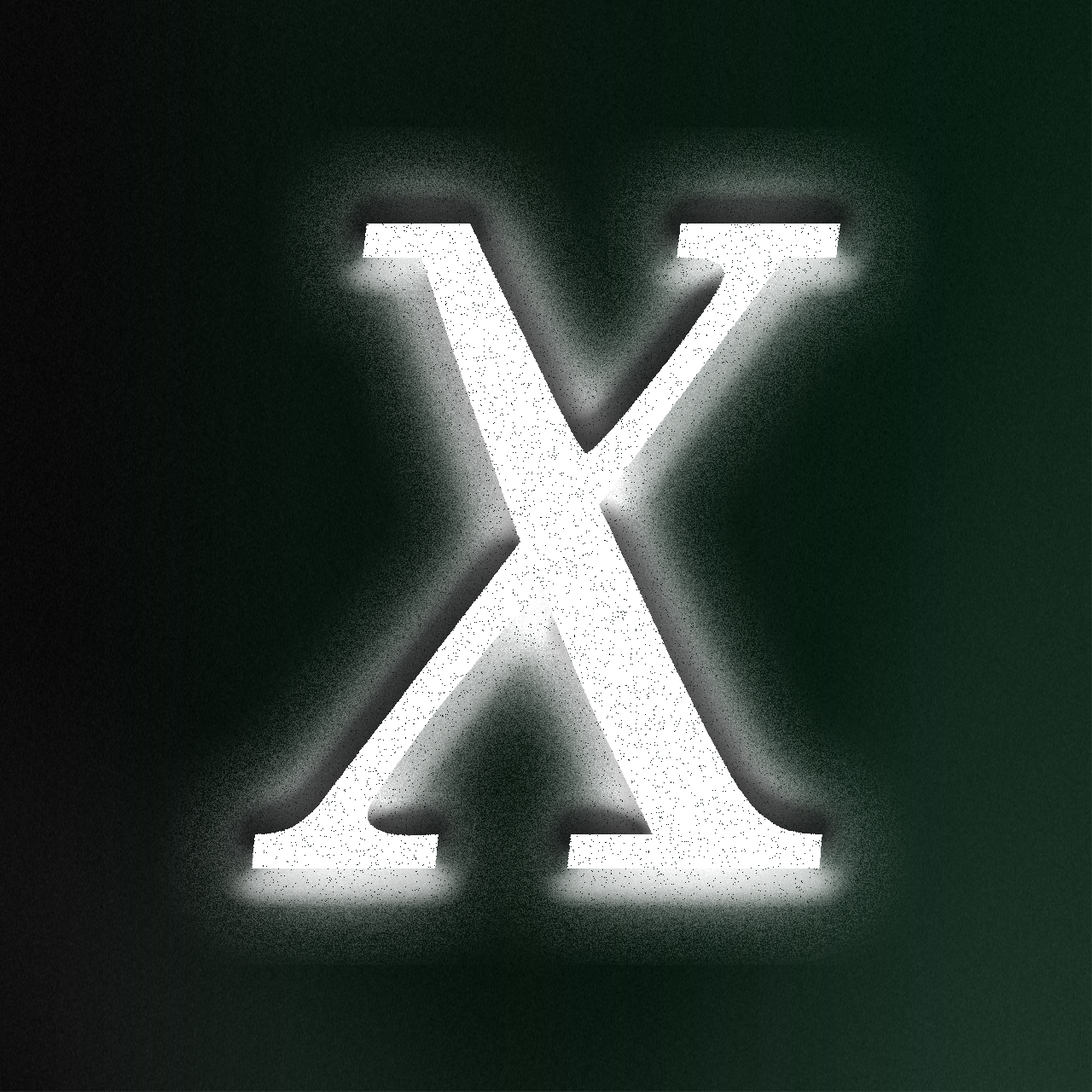
<style>
.page{position:relative;width:1092px;height:1092px}
.page>*{position:absolute;margin:0}
.t1{font:853.1px "DevroyeSCOSF";color:#ffffff}
</style>
<div class="page">
<p class="t1" style="left:252px;top:224px;width:588px;height:644px">X</p>
</div>
